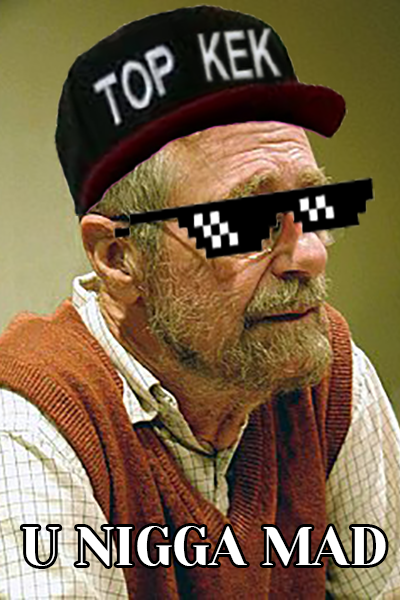
<style>
.page{position:relative;width:400px;height:600px}
.page>*{position:absolute;margin:0}
.t1{font:54px "YesevaOne-Regular";color:#ffffff;text-transform:uppercase}
</style>
<div class="page">
<p class="t1" style="left:22px;top:526px;width:364px;height:40px">u nigga mad</p>
</div>
